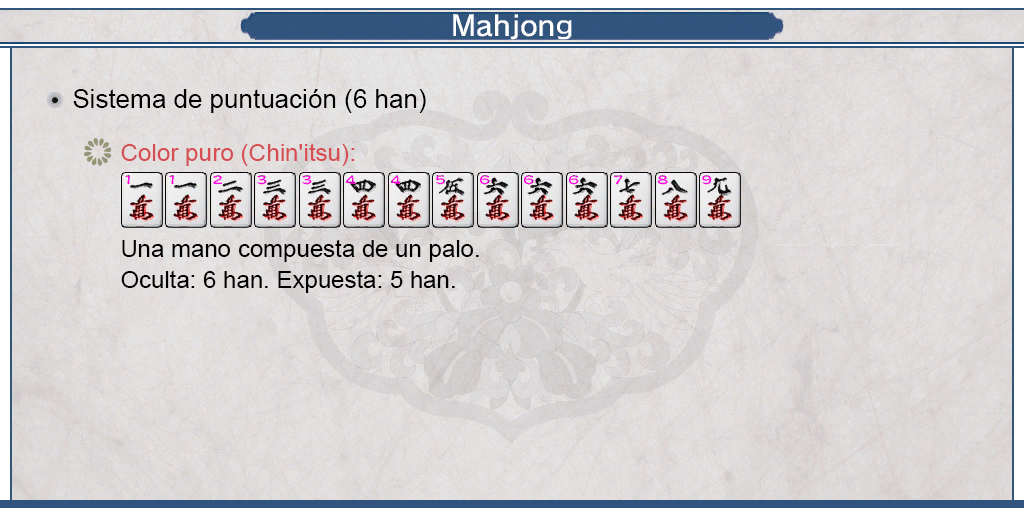
<style>
.page{position:relative;width:1024px;height:512px}
.page>*{position:absolute;margin:0}
.t1{font:26px "ArialMT";color:#000000}
.t2{font:24px "ArialMT";color:#d64d52}
.t3{font:24px/31px "ArialMT";color:#000000}
</style>
<div class="page">
<p class="t1" style="left:73px;top:89px;width:353px;height:24px">Sistema de puntuación (6 han)</p>
<p class="t2" style="left:121px;top:143px;width:234px;height:23px">Color puro (Chin'itsu):</p>
<p class="t3" style="left:121px;top:239px;width:358px;height:54px;text-align:justify">Una mano compuesta de un palo.<br>Oculta: 6 han. Expuesta: 5 han.</p>
</div>
